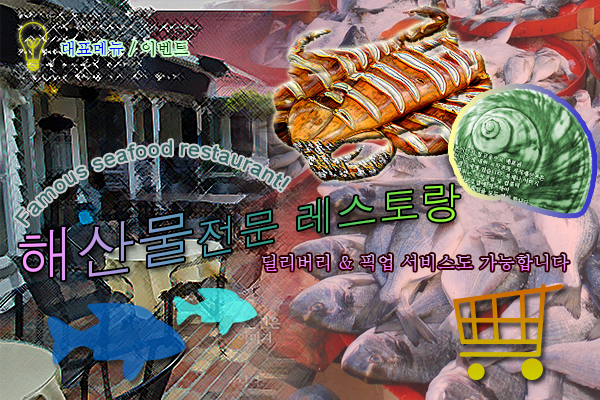
<style>
.page{position:relative;width:600px;height:400px}
.page>*{position:absolute;margin:0}
.t1{font:15.8px "Batang";color:#003300}
.t2{font:15.8px "Batang";color:#0000ff}
.t3{font:42px "Dotum"}
.t4{font:60px "Dotum"}
.t5{font:18px "Batang"}
</style>
<div class="page">
<p class="t1" style="left:61px;top:41px;width:128px;height:15px"><span class="t2">대표메뉴 </span>/ 이벤트</p>
<p class="t3" style="left:19px;top:184px;width:441px;height:97px"><span class="t4">해산물</span>전문 레스토랑</p>
<p class="t5" style="left:261px;top:254px;width:308px;height:17px">딜리버리 &amp; 픽업 서비스도 가능합니다</p>
</div>
